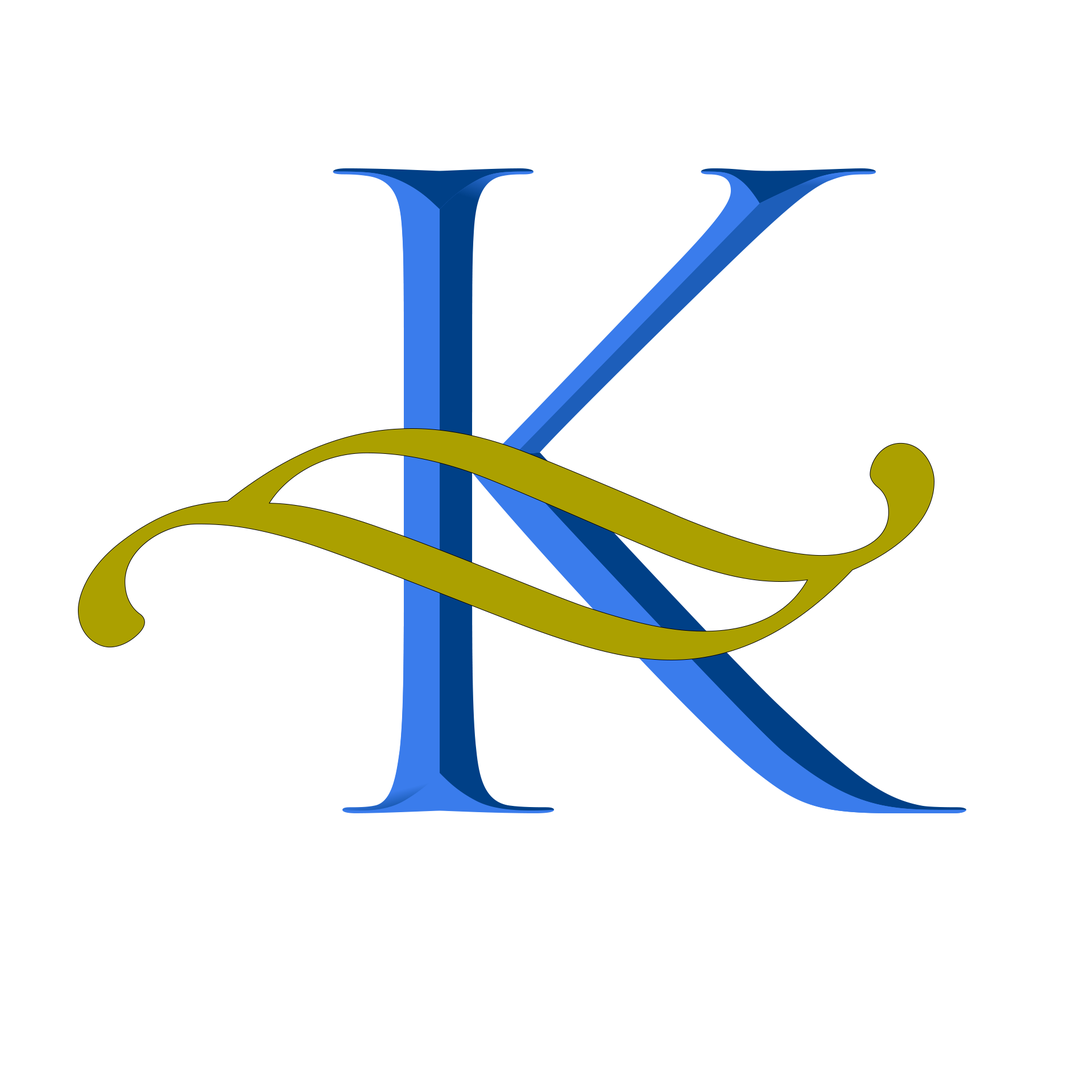
<style>
.page{position:relative;width:1092px;height:1092px;background:#ffffff}
.page>*{position:absolute;margin:0}
.t1{font:853px "TrajanColor-Concept";font-weight:bold}
</style>
<div class="page">
<p class="t1" style="left:333px;top:168px;width:633px;height:645px">K</p>
</div>
